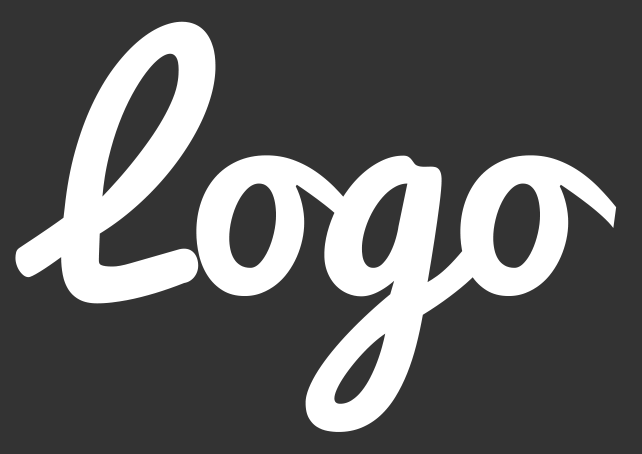
<style>
.page{position:relative;width:642px;height:454px;background:#333333}
.page>*{position:absolute;margin:0}
.t1{font:300px "Pacifico-Regular";color:#ffffff}
</style>
<div class="page">
<p class="t1" style="left:15px;top:21px;width:602px;height:411px">Logo</p>
</div>
